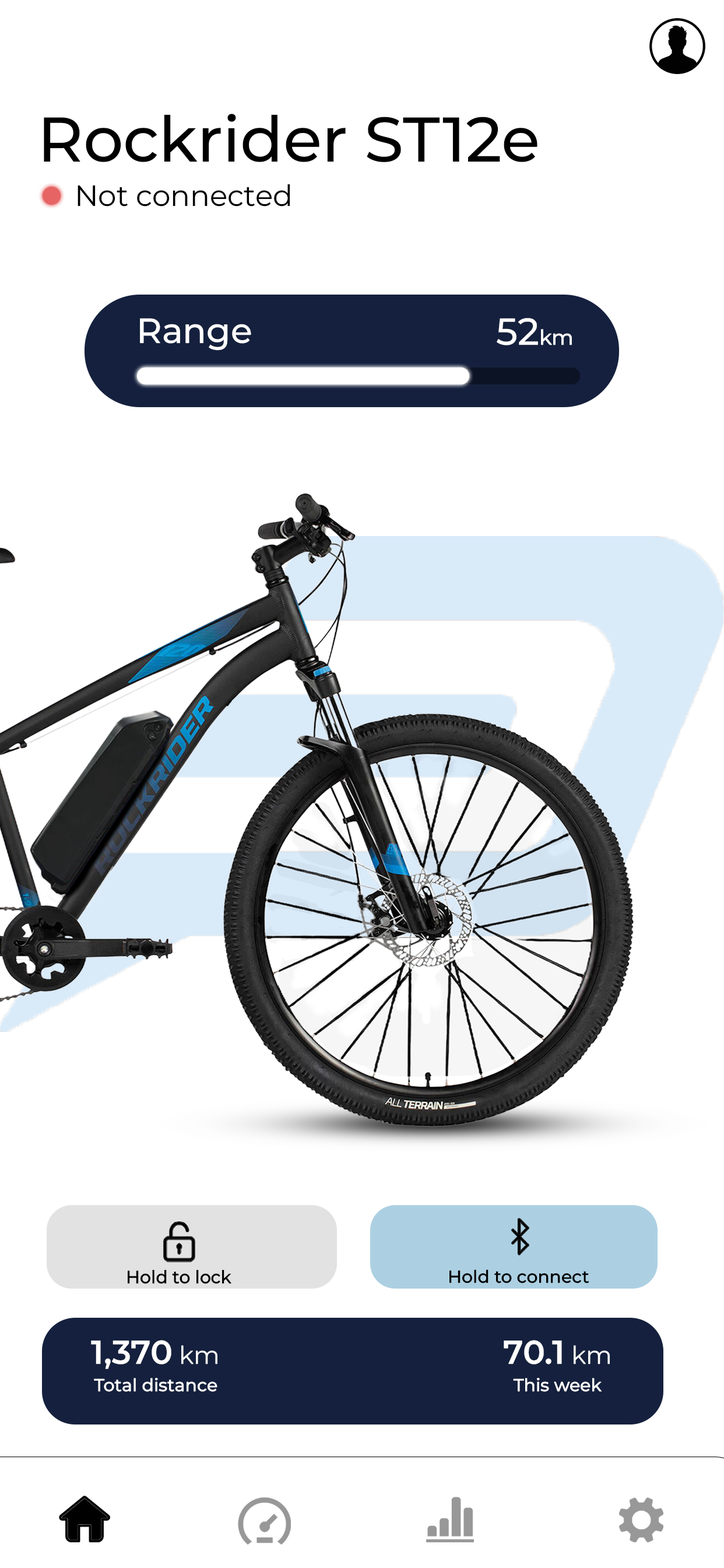
<style>
.page{position:relative;width:724px;height:1568px;background:#ffffff}
.page>*{position:absolute;margin:0}
.t1{font:63.1px "MontserratRoman-Medium";color:#000000;font-weight:bold}
.t2{font:29.2px "MontserratRoman-Regular";color:#000000;font-weight:bold}
.t3{font:35px "MontserratRoman-Medium";color:#ffffff;font-weight:bold}
.t4{font:37.6px "MontserratRoman-Medium";color:#ffffff;font-weight:bold}
.t5{font:20.9px "MontserratRoman-Medium";color:#ffffff;font-weight:bold}
.t6{font:17.9px "MontserratRoman-Medium";color:#000000;font-weight:bold}
.t7{font:17.4px "MontserratRoman-Medium";color:#000000;font-weight:bold}
.t8{font:33px "MontserratRoman-SemiBold";color:#ffffff;font-weight:bold}
.t9{font:24.6px "MontserratRoman-Regular";color:#ffffff;font-weight:bold}
.t10{font:17.5px "MontserratRoman-Medium";color:#ffffff;font-weight:bold}
</style>
<div class="page">
<p class="t1" style="left:44px;top:114px;width:494px;height:48px">Rockrider ST12e</p>
<p class="t2" style="left:78px;top:184px;width:212px;height:22px">Not connected</p>
<p class="t3" style="left:140px;top:318px;width:111px;height:33px">Range</p>
<p class="t4" style="left:497px;top:318px;width:75px;height:27px">52<span class="t5">km</span></p>
<p class="t6" style="left:128px;top:1270px;width:104px;height:14px">Hold to lock</p>
<p class="t7" style="left:450px;top:1269px;width:140px;height:14px">Hold to connect</p>
<p class="t8" style="left:91px;top:1340px;width:127px;height:29px">1,370 <span class="t9">km</span></p>
<p class="t8" style="left:504px;top:1340px;width:106px;height:24px">70.1 <span class="t9">km</span></p>
<p class="t10" style="left:94px;top:1378px;width:124px;height:14px">Total distance</p>
<p class="t10" style="left:513px;top:1378px;width:90px;height:14px">This week</p>
</div>
